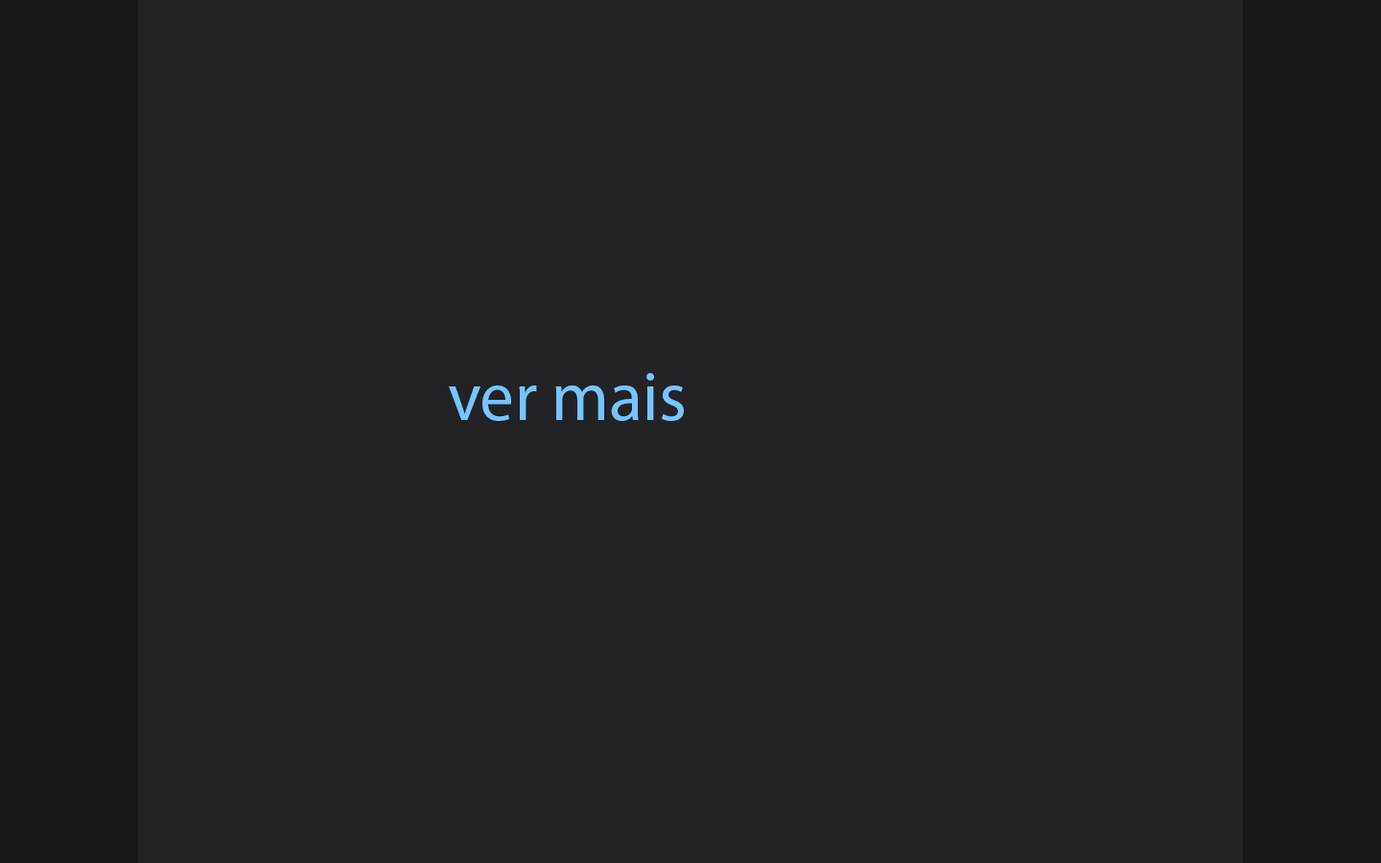
<style>
.page{position:relative;width:1381px;height:863px;background:#222227}
.page>*{position:absolute;margin:0}
.t1{font:69.1px "MyriadPro-Regular";color:#77c5fc}
</style>
<div class="page">
<p class="t1" style="left:449px;top:373px;width:235px;height:48px">ver mais</p>
</div>
